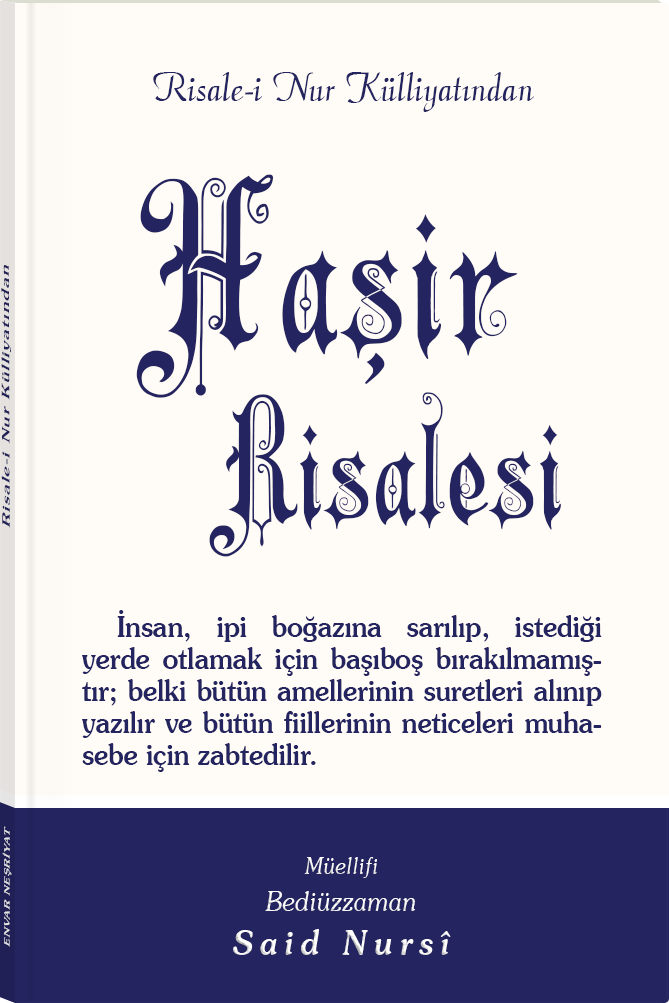
<style>
.page{position:relative;width:669px;height:1003px;background:#fffbf7}
.page>*{position:absolute;margin:0}
.t1{font:45.3px "Barla © 072 Aria ScriptScriptSSi";color:#242461;scale:0.94 1}
.t2{font:166.9px/173.1px "Barla © 001 Liva Nur";letter-spacing:-0.001em;color:#242461;scale:0.93 1}
.t3{font:231px/206.1px "Barla © 001 Liva Nur";letter-spacing:-0.001em;color:#242461;scale:0.93 1}
.t4{font:11.4px "Souvenir-Medium";letter-spacing:0.08em;color:#242461;scale:1.65 1}
.t5{font:28.7px/32.2px "Souvenir-Medium";color:#242461;scale:0.93 1}
.t6{font:8.3px "Souvenir-Medium";letter-spacing:0.08em;color:#e5e5e5;scale:1.43 1}
.t7{font:27.1px/37.8px "Souvenir-LightItalic";color:#ffffff;scale:0.92 1}
.t8{font:22.8px/39.8px "Souvenir-LightItalic";color:#ffffff;scale:0.92 1}
.t9{font:33.9px/43.8px "Souvenir-MediumItalic";letter-spacing:0.2em;color:#ffffff;scale:0.92 1}
</style>
<div class="page">
<p class="t1" style="left:153px;top:72px;width:381px;height:40px">Risale-i Nur Külliyatından</p>
<p class="t2" style="left:136px;top:174px;width:425px;height:383px;text-align:center"><span class="t3">Haşir<br></span>    Risalesi</p>
<p class="t4" style="left:1px;top:265px;width:10px;height:263px;rotate:-90deg">Risale-i Nur Külliyatından</p>
<p class="t5" style="left:82px;top:610px;width:520px;height:162px;text-align:justify">İnsan, ipi boğazına sarılıp, istediği yerde otlamak için başıboş bırakılmamıştır; belki bütün amellerinin suretleri alınıp yazılır ve bütün fiillerinin neticeleri muhasebe için zabtedilir.</p>
<p class="t6" style="left:2px;top:826px;width:10px;height:121px;rotate:-90deg">ENVAR NEŞRİYAT</p>
<p class="t7" style="left:233px;top:857px;width:218px;height:98px;text-align:center"><span class="t8">Müellifi<br></span>Bediüzzaman<br><span class="t9">Said Nursî</span></p>
</div>
